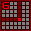
<style>
.page{position:relative;width:31px;height:31px;background:#320000}
.page>*{position:absolute;margin:0}
.t1{font:10px "rktr7rg";color:#ff0000}
</style>
<div class="page">
<p class="t1" style="left:2px;top:2px;width:7px;height:7px">G</p>
</div>
